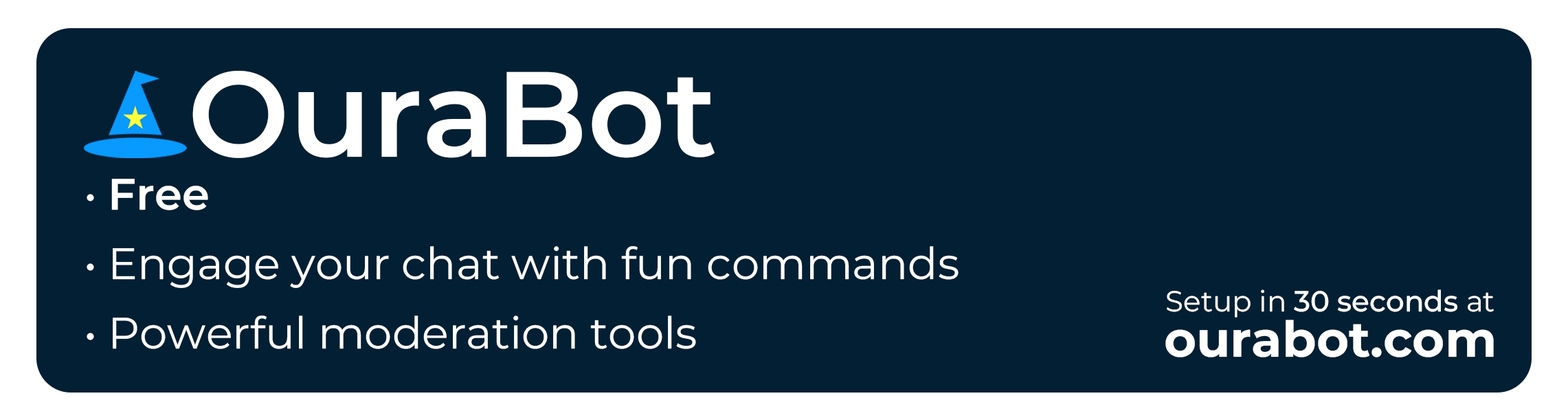
<style>
.page{position:relative;width:1568px;height:420px;background:#021f33}
.page>*{position:absolute;margin:0}
.t1{font:120.9px "MontserratRoman-SemiBold";color:#ffffff}
.t2{font:44px "MontserratRoman-Regular";color:#ffffff}
.t3{font:44px "MontserratRoman-SemiBold";color:#ffffff}
.t4{font:49.5px "MontserratRoman-Bold";color:#ffffff}
.t5{font:28.9px "MontserratRoman-Regular";color:#ffffff}
.t6{font:28.9px "MontserratRoman-Medium";color:#ffffff}
</style>
<div class="page">
<p class="t1" style="left:192px;top:71px;width:523px;height:87px">OuraBot</p>
<p class="t2" style="left:87px;top:179px;width:872px;height:170px">• <span class="t3">Free<br></span>• Engage your chat with fun commands<br>• Powerful moderation tools</p>
<p class="t4" style="left:1165px;top:289px;width:329px;height:68px;text-align:center"><span class="t5">Setup in </span><span class="t6">30 seconds </span><span class="t5">at<br></span>ourabot.com</p>
</div>
